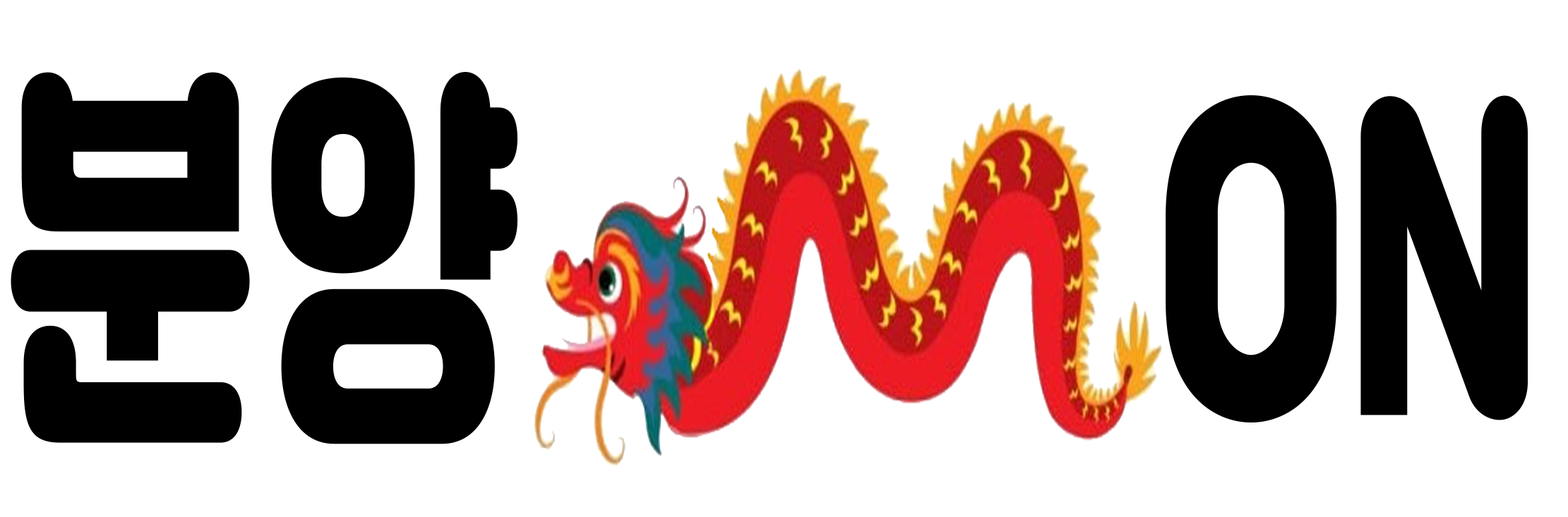
<style>
.page{position:relative;width:1568px;height:517px;background:#ffffff}
.page>*{position:absolute;margin:0}
.t1{font:395.1px "JalnanOTF";color:#000000;scale:0.65 1}
</style>
<div class="page">
<p class="t1" style="left:11px;top:72px;width:1517px;height:373px">분양          ON</p>
</div>
